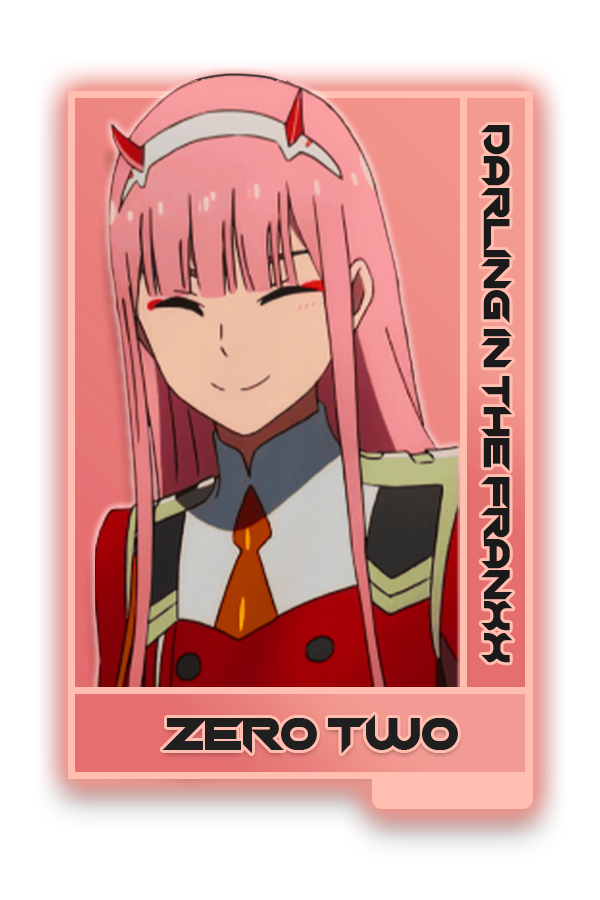
<style>
.page{position:relative;width:600px;height:900px;background:#ffffff}
.page>*{position:absolute;margin:0}
.t1{font:37.5px "Chopsic";color:#1f1f1f}
.t2{font:45.8px "Chopsic";color:#252525}
</style>
<div class="page">
<p class="t1" style="left:481px;top:125px;width:32px;height:538px;rotate:90deg">DARLING IN THE FRANXX</p>
<p class="t2" style="left:162px;top:714px;width:296px;height:40px">ZERO TWO</p>
</div>
